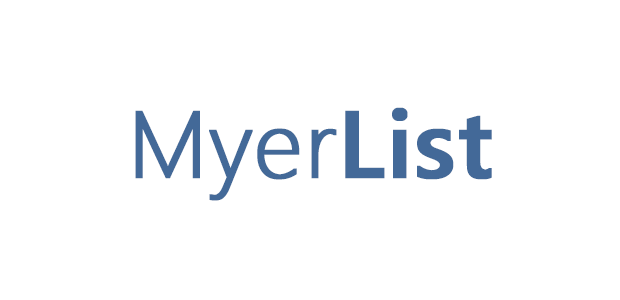
<style>
.page{position:relative;width:620px;height:300px;background:#ffffff}
.page>*{position:absolute;margin:0}
.t1{font:94.6px "SegoeWP-Light";color:#436998;font-weight:bold}
.t2{font:94.6px "SegoeWP-Semibold";color:#436998;font-weight:bold}
</style>
<div class="page">
<p class="t1" style="left:135px;top:107px;width:357px;height:94px">Myer<span class="t2">List</span></p>
</div>
